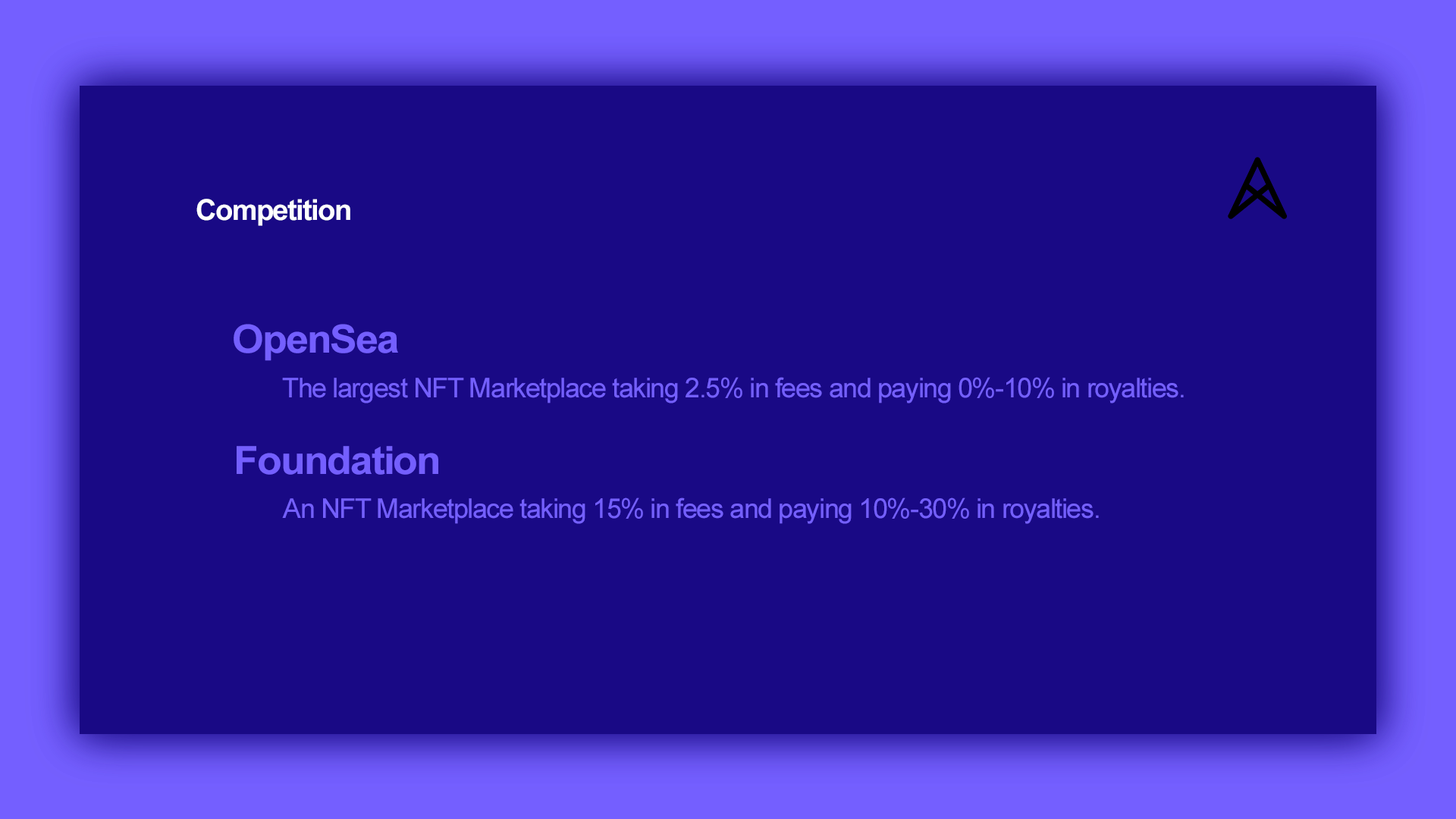
<style>
.page{position:relative;width:1456px;height:819px;background:#190985}
.page>*{position:absolute;margin:0}
.t1{font:28.8px "Arial-BoldMT";letter-spacing:-0.04em;color:#feffff}
.t2{font:38.8px "Arial-BoldMT";letter-spacing:-0.04em;color:#745fff;scale:1.05 1}
.t3{font:27.3px "ArialMT";letter-spacing:-0.04em;color:#745fff}
</style>
<div class="page">
<p class="t1" style="left:196px;top:199px;width:154px;height:27px">Competition</p>
<p class="t2" style="left:234px;top:324px;width:164px;height:37px">OpenSea</p>
<p class="t3" style="left:282px;top:377px;width:902px;height:26px">The largest NFT Marketplace taking 2.5% in fees and paying 0%-10% in royalties.</p>
<p class="t2" style="left:237px;top:446px;width:201px;height:29px">Foundation</p>
<p class="t3" style="left:282px;top:497px;width:817px;height:27px">An NFT Marketplace taking 15% in fees and paying 10%-30% in royalties.</p>
</div>
